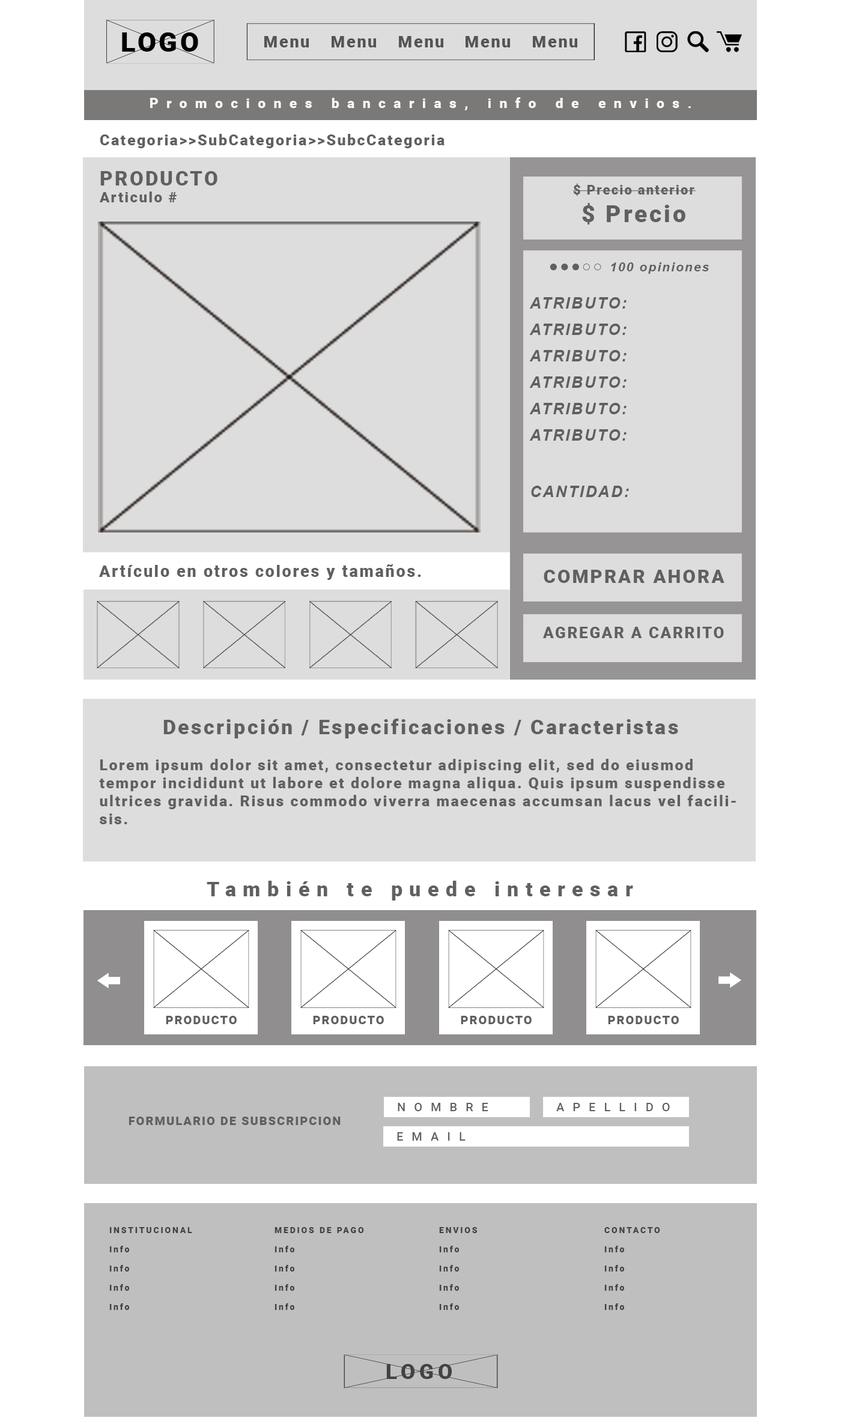
<style>
.page{position:relative;width:841px;height:1418px;background:#dedddd}
.page>*{position:absolute;margin:0}
.t1{font:13.8px "Roboto-Black";letter-spacing:0.58em;color:#fcf9f9}
.t2{font:15px "Roboto-Black";letter-spacing:0.1em;color:#606060}
.t3{font:14.4px "Roboto-Black";letter-spacing:0.1em;color:#606060}
.t4{font:19.8px "Roboto-Black";letter-spacing:0.1em;color:#606060}
.t5{font:13.2px "Roboto-Black";letter-spacing:0.1em;color:#606060}
.t6{font:23.4px "Roboto-Black";letter-spacing:0.1em;color:#606060}
.t7{font:12.6px "Arial-BoldItalicMT";letter-spacing:0.1em;color:#606060}
.t8{font:15.6px "Arial-BoldItalicMT";letter-spacing:0.1em;color:#606060}
.t9{font:15.6px/26.4px "Arial-BoldItalicMT";letter-spacing:0.1em;color:#606060}
.t10{font:16.2px "Roboto-Black";letter-spacing:0.1em;color:#606060}
.t11{font:18.6px "Roboto-Black";letter-spacing:0.1em;color:#606060}
.t12{font:15.6px "Roboto-Black";letter-spacing:0.1em;color:#606060}
.t13{font:20.4px "Roboto-Black";letter-spacing:0.1em;color:#606060}
.t14{font:20.4px "Roboto-Black";letter-spacing:0.34em;color:#606060}
.t15{font:12px "Roboto-Black";letter-spacing:0.1em;color:#606060}
.t16{font:12px "Roboto-Medium";letter-spacing:0.7em;color:#606060}
.t17{font:8.4px/19.2px "Roboto-Black";letter-spacing:0.2em;color:#434242}
</style>
<div class="page">
<p class="t1" style="left:150px;top:97px;width:541px;height:13px">Promociones bancarias, info de envios.</p>
<p class="t2" style="left:100px;top:134px;width:344px;height:14px">Categoria&gt;&gt;SubCategoria&gt;&gt;SubcCategoria</p>
<p class="t3" style="left:100px;top:171px;width:117px;height:31px"><span class="t4">PRODUCTO<br></span>Articulo #</p>
<p class="t5" style="left:573px;top:183px;width:123px;height:42px;text-align:center">$ Precio anterior<br><span class="t6">$ Precio</span></p>
<p class="t7" style="left:549px;top:262px;width:160px;height:12px"><span class="t8">●●●○○ </span>100 opiniones</p>
<p class="t9" style="left:529px;top:297px;width:100px;height:200px">ATRIBUTO: <br>ATRIBUTO: <br>ATRIBUTO: <br>ATRIBUTO: <br>ATRIBUTO: <br>ATRIBUTO: <br><span class="t8"><br><br>CANTIDAD:</span></p>
<p class="t10" style="left:99px;top:564px;width:322px;height:16px">Artículo en otros colores y tamaños.</p>
<p class="t11" style="left:543px;top:570px;width:181px;height:13px">COMPRAR AHORA</p>
<p class="t12" style="left:543px;top:627px;width:181px;height:11px">AGREGAR A CARRITO</p>
<p class="t2" style="left:99px;top:719px;width:637px;height:105px"><span class="t13">Descripción / Especificaciones / Caracteristas<br></span><br>Lorem ipsum dolor sit amet, consectetur adipiscing elit, sed do eiusmod tempor incididunt ut labore et dolore magna aliqua. Quis ipsum suspendisse ultrices gravida. Risus commodo viverra maecenas accumsan lacus vel facilisis.</p>
<p class="t14" style="left:207px;top:881px;width:426px;height:20px">También te puede interesar</p>
<p class="t15" style="left:166px;top:1016px;width:71px;height:8px">PRODUCTO</p>
<p class="t15" style="left:313px;top:1016px;width:71px;height:8px">PRODUCTO</p>
<p class="t15" style="left:461px;top:1016px;width:70px;height:8px">PRODUCTO</p>
<p class="t15" style="left:608px;top:1016px;width:71px;height:8px">PRODUCTO</p>
<p class="t16" style="left:398px;top:1103px;width:90px;height:9px">NOMBRE</p>
<p class="t16" style="left:556px;top:1103px;width:114px;height:9px">APELLIDO</p>
<p class="t15" style="left:129px;top:1117px;width:211px;height:8px">FORMULARIO DE SUBSCRIPCION</p>
<p class="t16" style="left:397px;top:1133px;width:68px;height:8px">EMAIL</p>
<p class="t17" style="left:109px;top:1227px;width:83px;height:83px">INSTITUCIONAL<br>Info<br>Info<br>Info<br>Info</p>
<p class="t17" style="left:274px;top:1227px;width:90px;height:83px">MEDIOS DE PAGO<br>Info<br>Info<br>Info<br>Info</p>
<p class="t17" style="left:439px;top:1227px;width:38px;height:83px">ENVIOS<br>Info<br>Info<br>Info<br>Info</p>
<p class="t17" style="left:604px;top:1227px;width:56px;height:83px">CONTACTO<br>Info<br>Info<br>Info<br>Info</p>
</div>
